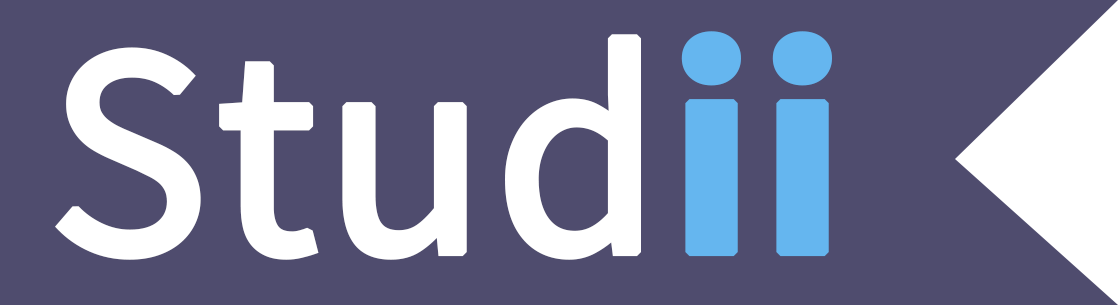
<style>
.page{position:relative;width:1118px;height:305px;background:#4f4c6e}
.page>*{position:absolute;margin:0}
.t1{font:300px "SourceSansPro-Regular";color:#ffffff;font-weight:bold}
.t2{font:300px "SourceSansPro-Bold";color:#65b6ef;font-weight:bold}
</style>
<div class="page">
<p class="t1" style="left:55px;top:31px;width:777px;height:229px">Stud<span class="t2">ii</span></p>
</div>
